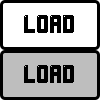
<style>
.page{position:relative;width:100px;height:100px;background:#ffffff}
.page>*{position:absolute;margin:0}
.t1{font:18px "LightPixel-7";color:#000000}
</style>
<div class="page">
<p class="t1" style="left:24px;top:15px;width:50px;height:18px">LOAD</p>
<p class="t1" style="left:24px;top:65px;width:50px;height:18px">LOAD</p>
</div>
